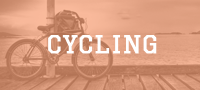
<style>
.page{position:relative;width:200px;height:90px}
.page>*{position:absolute;margin:0}
.t1{font:26px "OctinSportsRg-Regular";letter-spacing:0.06em;color:#ffffff;font-weight:bold}
</style>
<div class="page">
<p class="t1" style="left:48px;top:35px;width:109px;height:19px">CYCLING</p>
</div>
